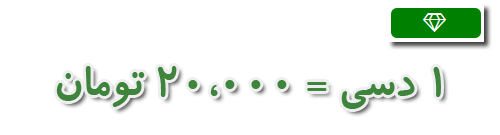
<style>
.page{position:relative;width:500px;height:135px;background:#ffffff}
.page>*{position:absolute;margin:0}
.t1{font:48px "BKoodakBold";color:#3f843c}
</style>
<div class="page">
<p class="t1" style="left:56px;top:66px;width:385px;height:43px">1 دسي = 20،000 تومان</p>
</div>
